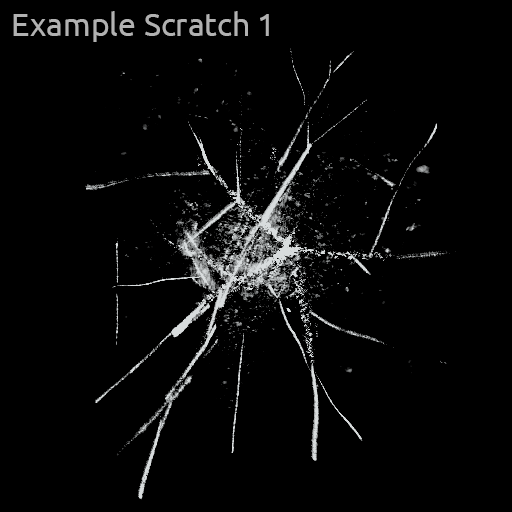
<style>
.page{position:relative;width:512px;height:512px;background:#000000}
.page>*{position:absolute;margin:0}
.t1{font:32px "Ubuntu";color:#b1b1b1}
</style>
<div class="page">
<p class="t1" style="left:13px;top:11px;width:256px;height:31px">Example Scratch 1</p>
</div>
